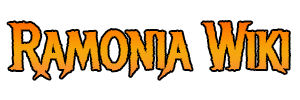
<style>
.page{position:relative;width:300px;height:100px;background:#ffffff}
.page>*{position:absolute;margin:0}
.t1{font:65px "MetalMania-Regular";letter-spacing:-0.04em;color:#f89b0a}
</style>
<div class="page">
<p class="t1" style="left:8px;top:22px;width:281px;height:57px">Ramonia Wiki</p>
</div>
